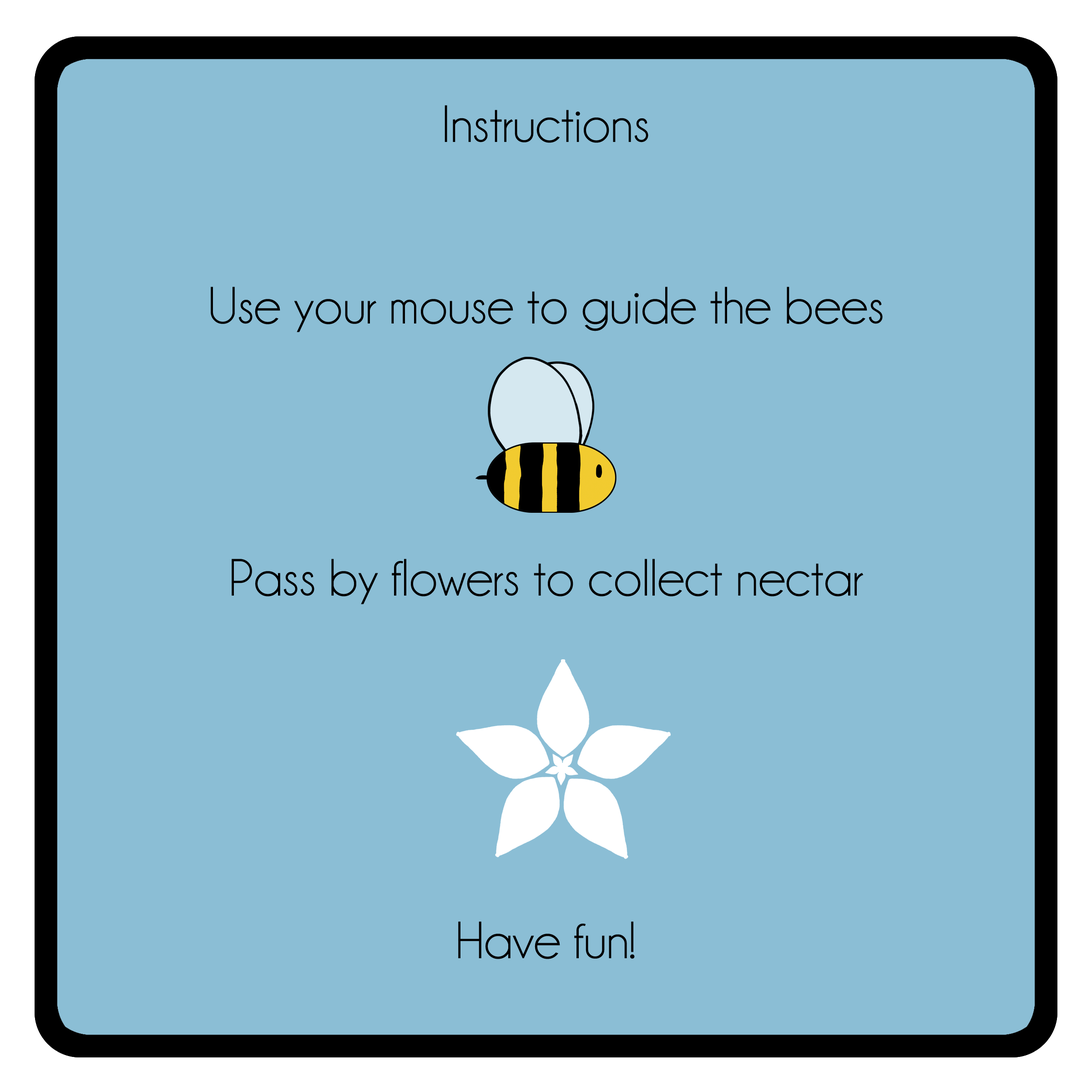
<style>
.page{position:relative;width:1092px;height:1092px;background:#8bbed5}
.page>*{position:absolute;margin:0}
.t1{font:52.9px/90.7px "Champagne&Limousines";color:#000000}
</style>
<div class="page">
<p class="t1" style="left:211px;top:105px;width:672px;height:854px;text-align:center">Instructions<br><br>Use your mouse to guide the bees<br><br><br>Pass by flowers to collect nectar<br><br><br><br>Have fun!</p>
</div>
